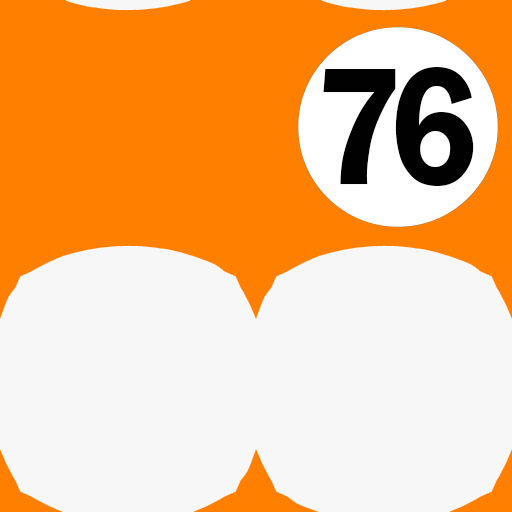
<style>
.page{position:relative;width:512px;height:512px;background:#f7f7f7}
.page>*{position:absolute;margin:0}
.t1{font:172.5px "FranklinGothic-Demi";letter-spacing:-0.05em;color:#010101;scale:0.87 1}
</style>
<div class="page">
<p class="t1" style="left:323px;top:67px;width:151px;height:119px">76</p>
</div>
